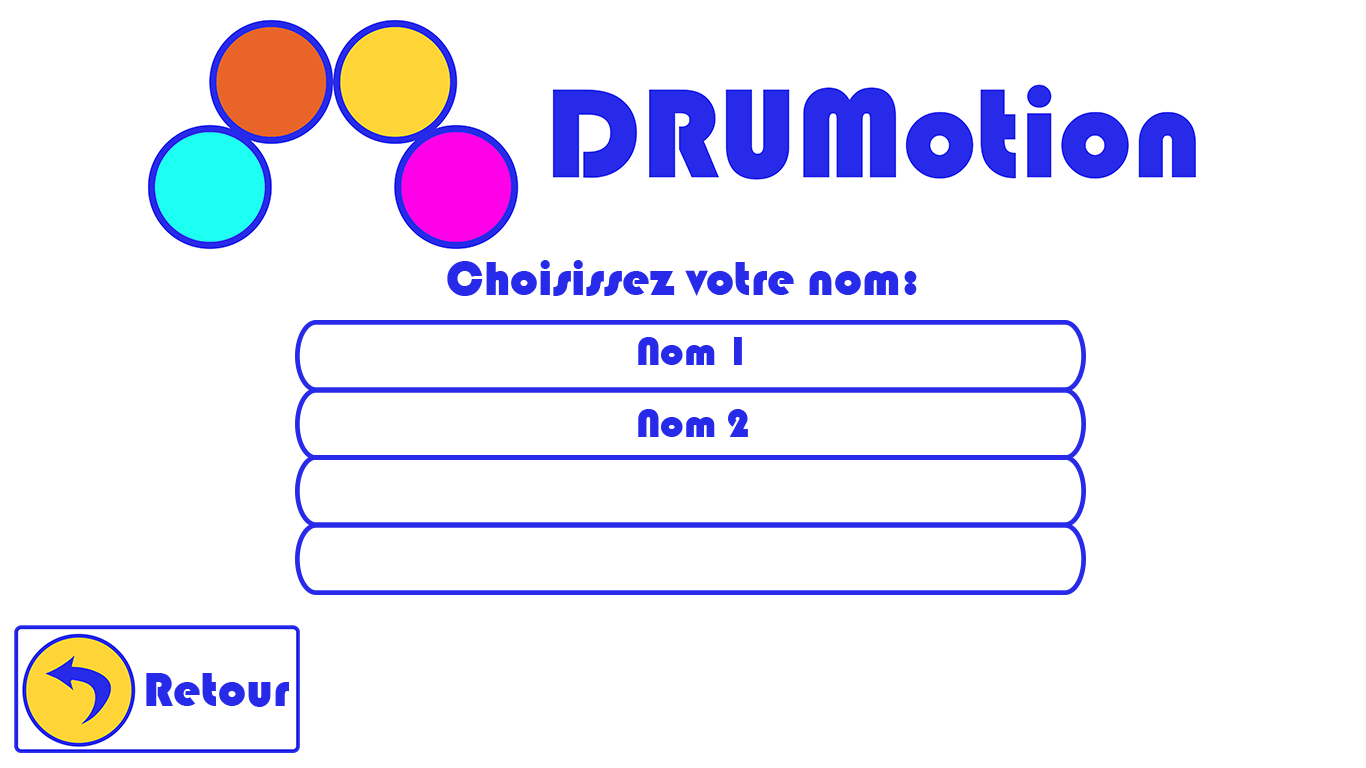
<style>
.page{position:relative;width:1366px;height:768px;background:#ffffff}
.page>*{position:absolute;margin:0}
.t1{font:50px "Bauhaus93";color:#272ae8}
.t2{font:41.7px "Bauhaus93";color:#272ae8}
</style>
<div class="page">
<p class="t1" style="left:447px;top:260px;width:470px;height:36px">Choisissez votre nom:</p>
<p class="t2" style="left:638px;top:337px;width:104px;height:28px">Nom 1</p>
<p class="t2" style="left:638px;top:409px;width:110px;height:28px">Nom 2</p>
<p class="t1" style="left:146px;top:673px;width:143px;height:34px">Retour</p>
</div>
